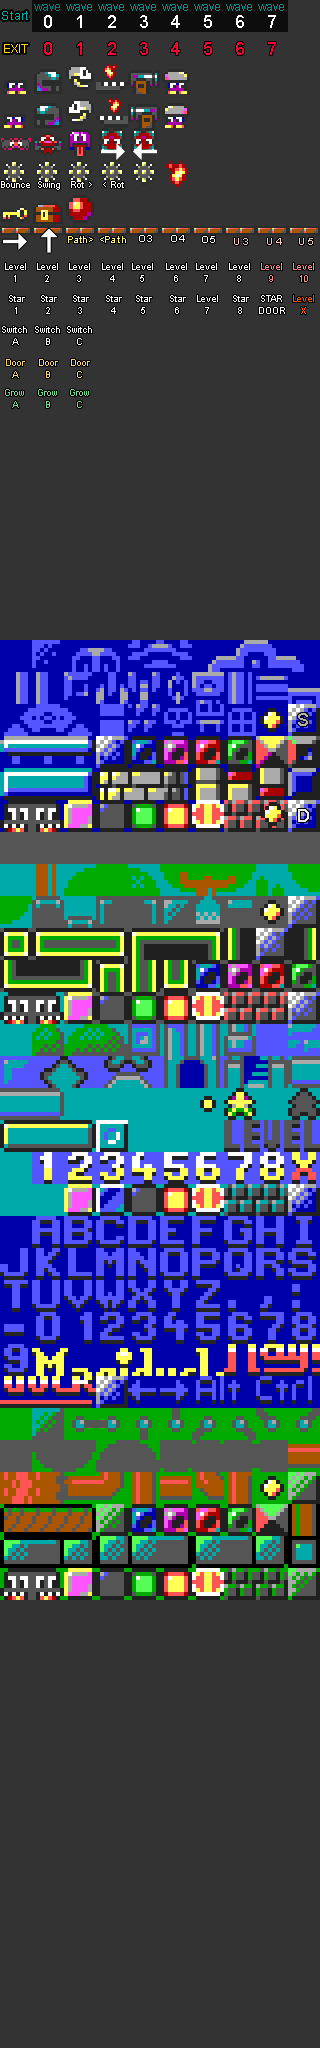
<style>
.page{position:relative;width:320px;height:2048px;background:#333333}
.page>*{position:absolute;margin:0}
.t1{font:12px "ArialMT";color:#048383}
.t2{font:12px "ArialMT";letter-spacing:0.025em;color:#00aaaa}
.t3{font:18px "ArialMT";letter-spacing:-0.075em;color:#ffffff}
.t4{font:12px "ArialMT";letter-spacing:-0.075em;color:#ffd800}
.t5{font:18px "ArialMT";letter-spacing:-0.075em;color:#ff0030}
.t6{font:9px "ArialMT";color:#ffffff}
.t7{font:10px "ArialMT";letter-spacing:-0.075em;color:#fff588}
.t8{font:10px "ArialMT";letter-spacing:-0.075em;color:#ffffff}
.t9{font:10px "ArialMT";letter-spacing:-0.075em;color:#fdcbcb}
.t10{font:9px/12px "ArialMT";color:#ffffff}
.t11{font:9px/12px "ArialMT";color:#ff8f8f}
.t12{font:9px/12px "ArialMT";color:#fc5308}
.t13{font:9px/12px "ArialMT";color:#fad479}
.t14{font:9px/12px "ArialMT";color:#7bdd94}
.t15{font:18px "ArialMT";color:#b6b2b2}
.t16{font:18px "ArialMT";color:#ececec}
</style>
<div class="page">
<p class="t1" style="left:34px;top:4px;width:26px;height:7px">wave</p>
<p class="t2" style="left:2px;top:11px;width:26px;height:9px">Start</p>
<p class="t3" style="left:44px;top:15px;width:8px;height:13px">0</p>
<p class="t3" style="left:77px;top:15px;width:5px;height:13px">1</p>
<p class="t3" style="left:108px;top:15px;width:8px;height:13px">2</p>
<p class="t3" style="left:140px;top:15px;width:8px;height:13px">3</p>
<p class="t3" style="left:171px;top:15px;width:9px;height:13px">4</p>
<p class="t3" style="left:204px;top:15px;width:8px;height:13px">5</p>
<p class="t3" style="left:236px;top:15px;width:8px;height:13px">6</p>
<p class="t3" style="left:268px;top:15px;width:8px;height:13px">7</p>
<p class="t4" style="left:4px;top:44px;width:24px;height:9px">EXIT</p>
<p class="t5" style="left:44px;top:42px;width:8px;height:13px">0</p>
<p class="t5" style="left:77px;top:42px;width:5px;height:13px">1</p>
<p class="t5" style="left:108px;top:42px;width:8px;height:13px">2</p>
<p class="t5" style="left:140px;top:42px;width:8px;height:13px">3</p>
<p class="t5" style="left:171px;top:42px;width:9px;height:13px">4</p>
<p class="t5" style="left:204px;top:42px;width:8px;height:13px">5</p>
<p class="t5" style="left:236px;top:42px;width:8px;height:13px">6</p>
<p class="t5" style="left:268px;top:42px;width:8px;height:13px">7</p>
<p class="t6" style="left:1px;top:181px;width:123px;height:9px">Bounce  Swing   Rot &gt;   &lt; Rot</p>
<p class="t7" style="left:68px;top:236px;width:25px;height:7px">Pa th &gt;</p>
<p class="t7" style="left:100px;top:236px;width:26px;height:7px">&lt;Pa t h</p>
<p class="t8" style="left:139px;top:235px;width:13px;height:7px">O 3</p>
<p class="t8" style="left:171px;top:235px;width:14px;height:7px">O 4</p>
<p class="t8" style="left:202px;top:236px;width:13px;height:7px">O 5</p>
<p class="t9" style="left:234px;top:238px;width:14px;height:7px">U  3</p>
<p class="t9" style="left:267px;top:238px;width:15px;height:7px">U  4</p>
<p class="t9" style="left:299px;top:238px;width:14px;height:7px">U  5</p>
<p class="t10" style="left:5px;top:263px;width:21px;height:19px;text-align:center">Level<br>1</p>
<p class="t10" style="left:37px;top:263px;width:21px;height:19px;text-align:center">Level<br>2</p>
<p class="t10" style="left:69px;top:263px;width:21px;height:19px;text-align:center">Level<br>3</p>
<p class="t10" style="left:102px;top:263px;width:21px;height:19px;text-align:center">Level<br>4</p>
<p class="t10" style="left:132px;top:263px;width:21px;height:19px;text-align:center">Level<br>5</p>
<p class="t10" style="left:166px;top:263px;width:21px;height:19px;text-align:center">Level<br>6</p>
<p class="t10" style="left:196px;top:263px;width:21px;height:19px;text-align:center">Level<br>7</p>
<p class="t10" style="left:229px;top:263px;width:21px;height:19px;text-align:center">Level<br>8</p>
<p class="t11" style="left:261px;top:263px;width:21px;height:19px;text-align:center">Level<br>9</p>
<p class="t11" style="left:293px;top:263px;width:21px;height:19px;text-align:center">Level<br>10</p>
<p class="t10" style="left:9px;top:295px;width:16px;height:19px;text-align:center">Star<br>1</p>
<p class="t10" style="left:41px;top:295px;width:16px;height:19px;text-align:center">Star<br>2</p>
<p class="t10" style="left:73px;top:295px;width:16px;height:19px;text-align:center">Star<br>3</p>
<p class="t10" style="left:106px;top:295px;width:16px;height:19px;text-align:center">Star<br>4</p>
<p class="t10" style="left:136px;top:295px;width:16px;height:19px;text-align:center">Star<br>5</p>
<p class="t10" style="left:170px;top:295px;width:16px;height:19px;text-align:center">Star<br>6</p>
<p class="t10" style="left:197px;top:295px;width:21px;height:19px;text-align:center">Level<br>7</p>
<p class="t10" style="left:233px;top:295px;width:16px;height:19px;text-align:center">Star<br>8</p>
<p class="t10" style="left:259px;top:295px;width:26px;height:19px;text-align:center">STAR<br>DOOR</p>
<p class="t12" style="left:293px;top:295px;width:21px;height:19px;text-align:center">Level<br>X</p>
<p class="t10" style="left:2px;top:326px;width:25px;height:19px;text-align:center">Switch<br>A</p>
<p class="t10" style="left:35px;top:326px;width:25px;height:19px;text-align:center">Switch<br>B</p>
<p class="t10" style="left:67px;top:326px;width:25px;height:19px;text-align:center">Switch<br>C</p>
<p class="t13" style="left:6px;top:359px;width:19px;height:19px;text-align:center">Door<br>A</p>
<p class="t13" style="left:39px;top:359px;width:19px;height:19px;text-align:center">Door<br>B</p>
<p class="t13" style="left:71px;top:359px;width:19px;height:19px;text-align:center">Door<br>C</p>
<p class="t14" style="left:5px;top:389px;width:19px;height:19px;text-align:center">Grow<br>A</p>
<p class="t14" style="left:38px;top:389px;width:19px;height:19px;text-align:center">Grow<br>B</p>
<p class="t14" style="left:70px;top:389px;width:19px;height:19px;text-align:center">Grow<br>C</p>
<p class="t15" style="left:298px;top:713px;width:10px;height:13px">S</p>
<p class="t16" style="left:298px;top:809px;width:11px;height:13px">D</p>
</div>
